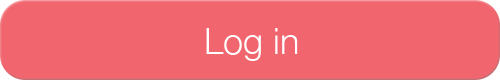
<style>
.page{position:relative;width:500px;height:80px;background:#f0656e}
.page>*{position:absolute;margin:0}
.t1{font:36px "HelveticaNeue-Light";color:#ffffff}
</style>
<div class="page">
<p class="t1" style="left:206px;top:28px;width:92px;height:33px">Log in</p>
</div>
